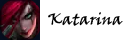
<style>
.page{position:relative;width:140px;height:40px;background:#ffffff}
.page>*{position:absolute;margin:0}
.t1{font:12px "VinerHandITC";color:#000000}
</style>
<div class="page">
<p class="t1" style="left:48px;top:12px;width:75px;height:14px">Katarina</p>
</div>
